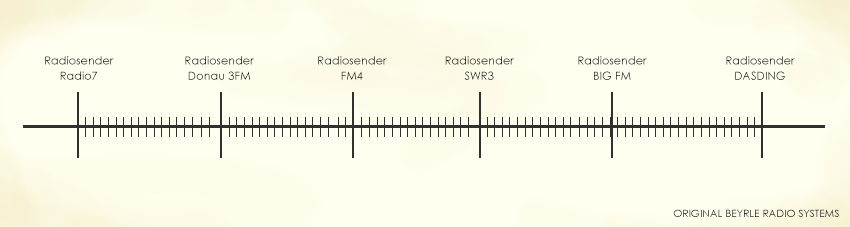
<style>
.page{position:relative;width:850px;height:227px;background:#fffff0}
.page>*{position:absolute;margin:0}
.t1{font:11.3px/15.2px "CenturyGothic";color:#000000}
.t2{font:11.3px/15.2px "CenturyGothic"}
.t3{font:10.4px "CenturyGothic"}
</style>
<div class="page">
<p class="t1" style="left:45px;top:56px;width:69px;height:24px;text-align:center">Radiosender<br>Radio7</p>
<p class="t2" style="left:185px;top:56px;width:69px;height:24px;text-align:center">Radiosender<br>Donau 3FM</p>
<p class="t2" style="left:318px;top:56px;width:69px;height:24px;text-align:center">Radiosender<br>FM4</p>
<p class="t1" style="left:445px;top:56px;width:69px;height:24px;text-align:center">Radiosender<br>SWR3</p>
<p class="t2" style="left:578px;top:56px;width:69px;height:24px;text-align:center">Radiosender<br>BIG FM</p>
<p class="t2" style="left:726px;top:56px;width:69px;height:24px;text-align:center">Radiosender<br>DASDING</p>
<p class="t3" style="left:673px;top:209px;width:166px;height:8px">ORIGINAL BEYRLE RADIO SYSTEMS</p>
</div>
